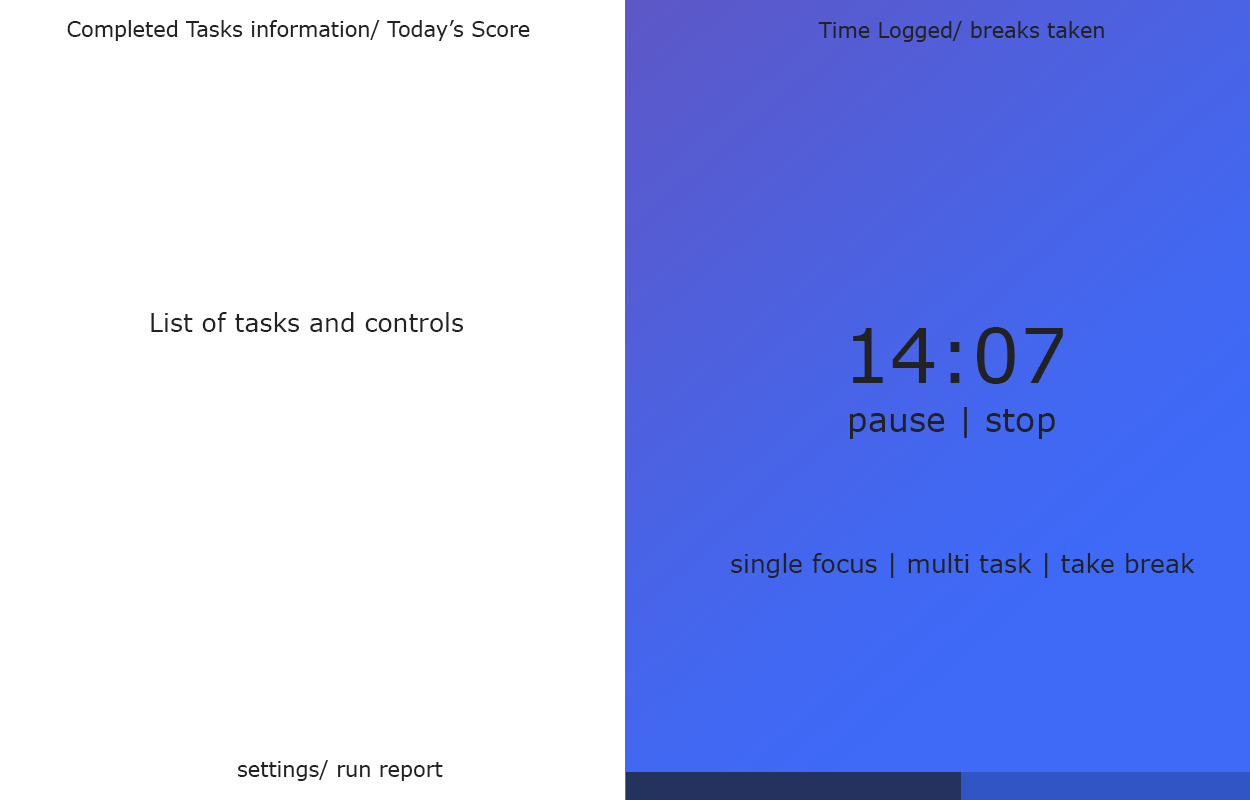
<style>
.page{position:relative;width:1250px;height:800px;background:#ffffff}
.page>*{position:absolute;margin:0}
.t1{font:20.8px "Verdana";color:#222222}
.t2{font:25px "Verdana";color:#222222}
.t3{font:75.1px "Verdana";color:#222222}
.t4{font:33.3px "Verdana";color:#222222}
</style>
<div class="page">
<p class="t1" style="left:67px;top:20px;width:463px;height:21px">Completed Tasks information/ Today’s Score</p>
<p class="t1" style="left:818px;top:21px;width:286px;height:21px">Time Logged/ breaks taken</p>
<p class="t2" style="left:151px;top:312px;width:312px;height:20px">List of tasks and controls</p>
<p class="t3" style="left:853px;top:327px;width:210px;height:57px">14:07</p>
<p class="t4" style="left:850px;top:407px;width:205px;height:32px">pause | stop</p>
<p class="t2" style="left:731px;top:553px;width:464px;height:25px">single focus | multi task | take break</p>
<p class="t1" style="left:238px;top:760px;width:205px;height:21px">settings/ run report</p>
</div>
